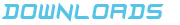
<style>
.page{position:relative;width:180px;height:25px;background:#ffffff}
.page>*{position:absolute;margin:0}
.t1{font:24px "Emberlike";color:#55c4e6;font-style:italic}
</style>
<div class="page">
<p class="t1" style="left:2px;top:2px;width:162px;height:20px">DOWNLOADS</p>
</div>
